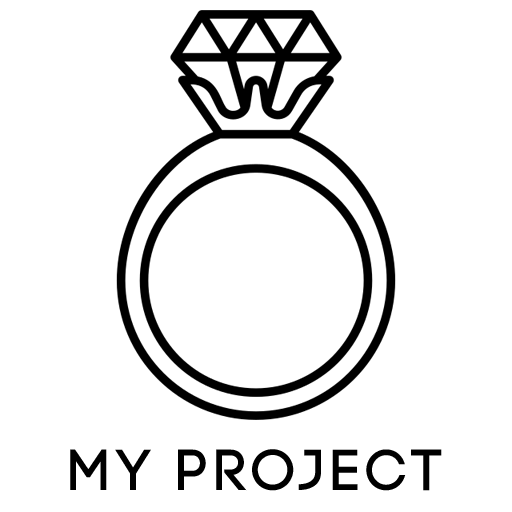
<style>
.page{position:relative;width:512px;height:512px;background:#ffffff}
.page>*{position:absolute;margin:0}
.t1{font:57.7px "Code-Pro-Demo";letter-spacing:0.08em;color:#000000;text-transform:uppercase}
</style>
<div class="page">
<p class="t1" style="left:70px;top:449px;width:372px;height:42px">my project</p>
</div>
